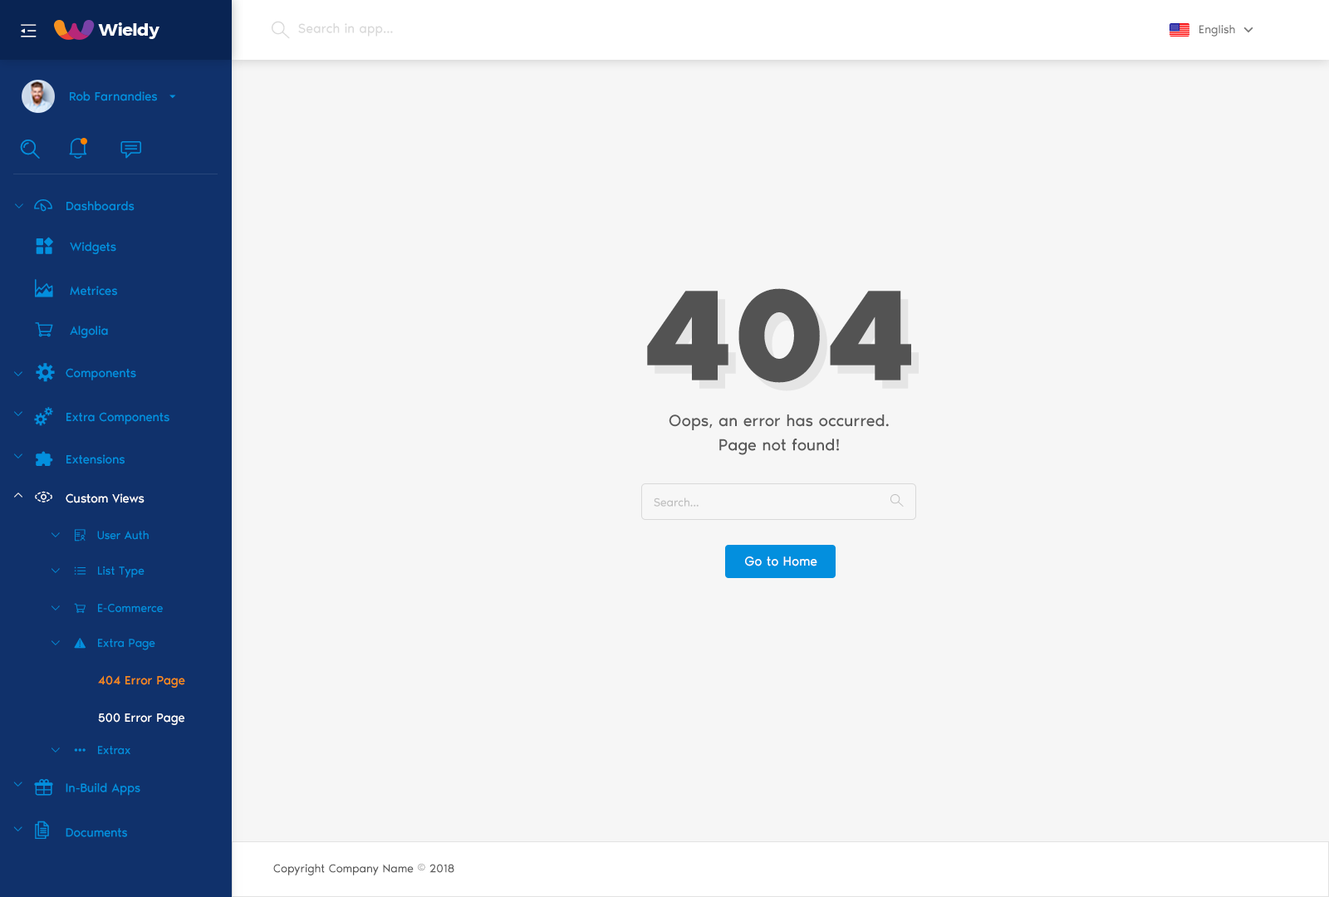
<style>
.page{position:relative;width:1329px;height:897px;background:#f6f6f6}
.page>*{position:absolute;margin:0}
.t1{font:13.3px "NoirPro-Regular";color:#d9d9d9}
.t2{font:11.6px "NoirPro-Regular";color:#757575}
.t3{font:12.5px "NoirPro-Regular";color:#038fde}
.t4{font:10px "gaxonant"}
.t5{font:18.3px "gaxonant";color:#038fde}
.t6{font:132.9px "NoirPro-Bold";color:#535353}
.t7{font:9.7px "gaxonant";color:#038fde}
.t8{font:16.6px/19.9px "NoirPro-Regular";color:#595959}
.t9{font:18.3px "gaxonant";color:#ffffff}
.t10{font:12.5px "NoirPro-Regular";color:#ffffff}
.t11{font:11.6px "NoirPro-Regular";color:#bfbfbf}
.t12{font:10px "gaxonant";color:#038fde}
.t13{font:11.6px "gaxonant";color:#038fde}
.t14{font:11.6px "NoirPro-Regular";color:#038fde}
.t15{font:13.3px "NoirPro-Regular";color:#ffffff}
.t16{font:12.5px/33.2px "NoirPro-Regular";color:#fa8c16}
.t17{font:12.5px/33.2px "NoirPro-Regular";color:#ffffff}
.t18{font:12.4px "NoirPro-Regular";color:#038fde}
.t19{font:18.2px "gaxonant";color:#038fde}
.t20{font:11.6px "NoirPro-Regular";color:#595959}
</style>
<div class="page">
<p class="t1" style="left:298px;top:23px;width:95px;height:14px">Search in app...</p>
<p class="t2" style="left:1200px;top:25px;width:35px;height:12px">English</p>
<p class="t3" style="left:70px;top:91px;width:87px;height:10px">Rob Farnandies</p>
<p class="t4" style="left:15px;top:204px;width:8px;height:5px">2</p>
<p class="t5" style="left:34px;top:199px;width:18px;height:13px">-</p>
<p class="t3" style="left:66px;top:201px;width:69px;height:10px">Dashboards</p>
<p class="t3" style="left:70px;top:242px;width:46px;height:12px">Widgets</p>
<p class="t5" style="left:35px;top:279px;width:18px;height:18px">m</p>
<p class="t3" style="left:70px;top:286px;width:47px;height:10px">Metrices</p>
<p class="t6" style="left:647px;top:288px;width:264px;height:95px">404</p>
<p class="t3" style="left:70px;top:326px;width:38px;height:12px">Algolia</p>
<p class="t5" style="left:36px;top:363px;width:19px;height:19px">%</p>
<p class="t7" style="left:14px;top:371px;width:8px;height:5px">2</p>
<p class="t3" style="left:66px;top:368px;width:70px;height:12px">Components</p>
<p class="t7" style="left:14px;top:411px;width:8px;height:5px">2</p>
<p class="t3" style="left:66px;top:412px;width:103px;height:12px">Extra Components</p>
<p class="t8" style="left:669px;top:415px;width:220px;height:40px;text-align:center">Oops, an error has occurred. <br>Page not found!</p>
<p class="t7" style="left:14px;top:454px;width:8px;height:5px">2</p>
<p class="t3" style="left:66px;top:454px;width:59px;height:10px">Extensions</p>
<p class="t4" style="left:14px;top:493px;width:8px;height:5px">5</p>
<p class="t9" style="left:35px;top:491px;width:17px;height:12px">,</p>
<p class="t10" style="left:66px;top:493px;width:79px;height:10px">Custom Views</p>
<p class="t11" style="left:654px;top:498px;width:45px;height:9px">Search...</p>
<p class="t12" style="left:52px;top:532px;width:8px;height:5px">2</p>
<p class="t13" style="left:75px;top:529px;width:11px;height:13px">r</p>
<p class="t14" style="left:97px;top:531px;width:52px;height:9px">User Auth</p>
<p class="t15" style="left:745px;top:557px;width:72px;height:10px">Go to Home</p>
<p class="t12" style="left:52px;top:568px;width:8px;height:5px">2</p>
<p class="t13" style="left:74px;top:567px;width:12px;height:8px">h</p>
<p class="t14" style="left:98px;top:567px;width:47px;height:11px">List Type</p>
<p class="t12" style="left:52px;top:606px;width:8px;height:5px">2</p>
<p class="t14" style="left:98px;top:604px;width:65px;height:8px">E-Commerce</p>
<p class="t12" style="left:52px;top:640px;width:8px;height:5px">2</p>
<p class="t13" style="left:74px;top:638px;width:12px;height:11px">~</p>
<p class="t14" style="left:98px;top:639px;width:57px;height:11px">Extra Page</p>
<p class="t16" style="left:98px;top:675px;width:87px;height:50px">404 Error Page<br><span class="t17">500 Error Page</span></p>
<p class="t12" style="left:52px;top:748px;width:8px;height:5px">2</p>
<p class="t13" style="left:74px;top:748px;width:12px;height:4px">{</p>
<p class="t14" style="left:98px;top:746px;width:32px;height:8px">Extrax</p>
<p class="t7" style="left:13px;top:782px;width:9px;height:5px">2</p>
<p class="t18" style="left:66px;top:783px;width:74px;height:13px">In-Build Apps</p>
<p class="t19" style="left:35px;top:821px;width:14px;height:18px">)</p>
<p class="t7" style="left:13px;top:827px;width:9px;height:5px">2</p>
<p class="t18" style="left:66px;top:828px;width:61px;height:9px">Documents</p>
<p class="t20" style="left:273px;top:864px;width:181px;height:12px">Copyright Company Name © 2018</p>
</div>
